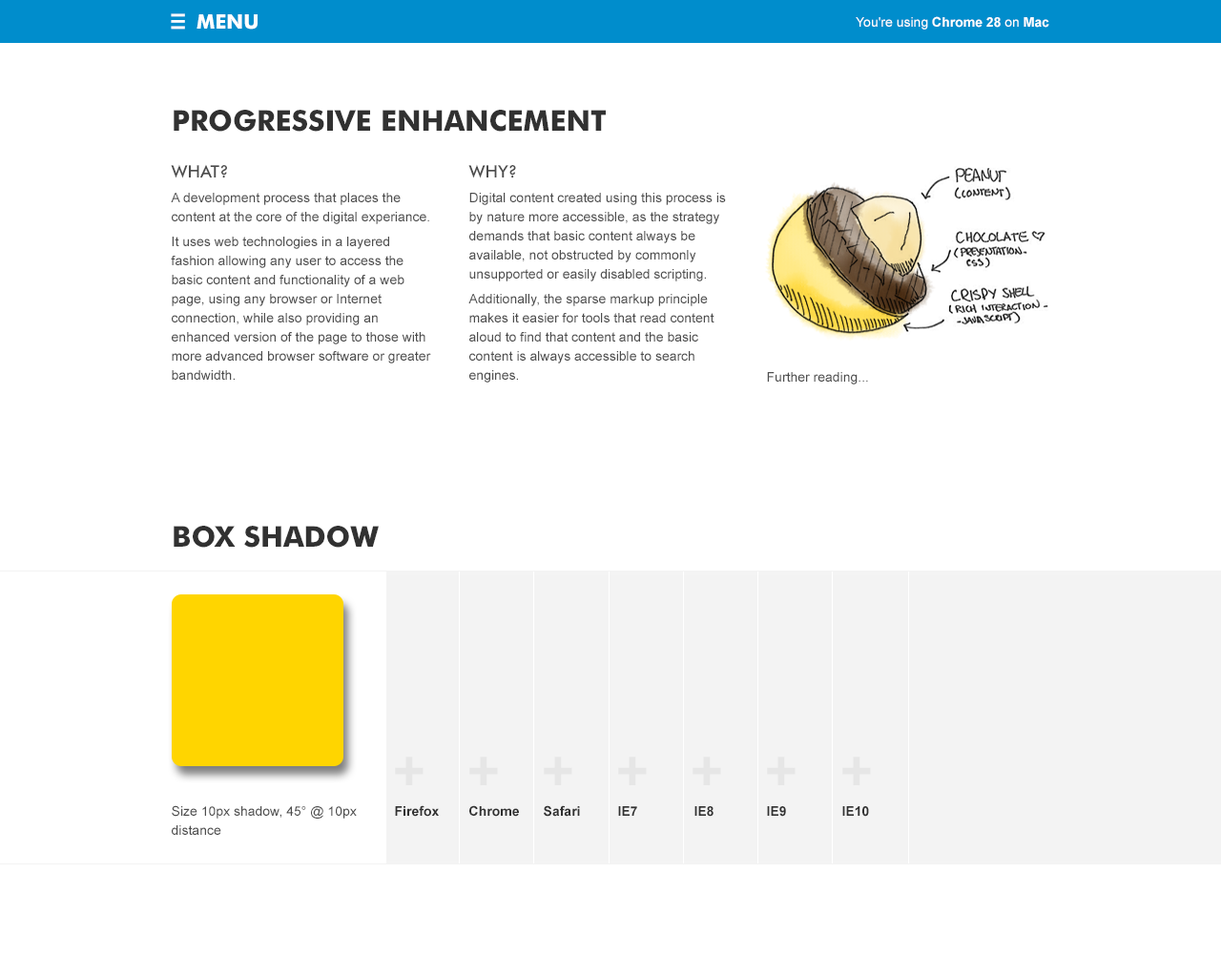
<style>
.page{position:relative;width:1221px;height:977px;background:#ffffff}
.page>*{position:absolute;margin:0}
.t1{font:28.6px "ArialMT";color:#ffffff;text-transform:uppercase}
.t2{font:20px "FuturaBT-Bold";color:#ffffff;text-transform:uppercase}
.t3{font:13.4px "ArialMT";color:#ffffff}
.t4{font:13.4px "Arial-BoldMT";color:#ffffff}
.t5{font:28.6px "FuturaBT-Bold";color:#313131;text-transform:uppercase}
.t6{font:13.4px/19.1px "ArialMT";color:#4d4d4d}
.t7{font:17.2px/19.1px "FuturaBT-Medium";color:#4d4d4d;text-transform:uppercase}
.t8{font:13.4px "ArialMT";color:#4d4d4d}
.t9{font:47.7px "FuturaBT-ExtraBlack";color:#e6e6e6;text-transform:uppercase}
.t10{font:13.4px "Arial-BoldMT";color:#313131}
</style>
<div class="page">
<p class="t1" style="left:171px;top:13px;width:14px;height:17px">≡</p>
<p class="t2" style="left:196px;top:14px;width:62px;height:16px">MENU</p>
<p class="t3" style="left:856px;top:16px;width:193px;height:14px">You're using<span class="t4"> Chrome 28 </span>on<span class="t4"> Mac</span></p>
<p class="t5" style="left:174px;top:110px;width:432px;height:22px">Progressive Enhancement</p>
<p class="t6" style="left:171px;top:164px;width:260px;height:216px"><span class="t7">What?<br></span>A development process that places the content at the core of the digital experiance. <br>It uses web technologies in a layered fashion allowing any user to access the basic content and functionality of a web page, using any browser or Internet connection, while also providing an enhanced version of the page to those with more advanced browser software or greater bandwidth.</p>
<p class="t6" style="left:468px;top:164px;width:258px;height:218px"><span class="t7">WHy?<br></span>Digital content created using this process is by nature more accessible, as the strategy demands that basic content always be available, not obstructed by commonly unsupported or easily disabled scripting. <br>Additionally, the sparse markup principle makes it easier for tools that read content aloud to find that content and the basic content is always accessible to search engines.</p>
<p class="t8" style="left:767px;top:372px;width:101px;height:12px">Further reading...</p>
<p class="t5" style="left:174px;top:526px;width:205px;height:21px">Box Shadow</p>
<p class="t9" style="left:395px;top:756px;width:28px;height:29px">+</p>
<p class="t9" style="left:469px;top:756px;width:29px;height:29px">+</p>
<p class="t9" style="left:544px;top:756px;width:28px;height:29px">+</p>
<p class="t9" style="left:618px;top:756px;width:29px;height:29px">+</p>
<p class="t9" style="left:692px;top:756px;width:29px;height:29px">+</p>
<p class="t9" style="left:767px;top:756px;width:28px;height:29px">+</p>
<p class="t9" style="left:842px;top:756px;width:29px;height:29px">+</p>
<p class="t6" style="left:172px;top:805px;width:185px;height:30px">Size 10px shadow, 45° @ 10px distance</p>
<p class="t10" style="left:395px;top:805px;width:44px;height:11px">Firefox</p>
<p class="t10" style="left:469px;top:805px;width:50px;height:11px">Chrome</p>
<p class="t10" style="left:544px;top:805px;width:36px;height:11px">Safari</p>
<p class="t10" style="left:618px;top:806px;width:19px;height:10px">IE7</p>
<p class="t10" style="left:694px;top:806px;width:19px;height:10px">IE8</p>
<p class="t10" style="left:767px;top:806px;width:19px;height:10px">IE9</p>
<p class="t10" style="left:842px;top:806px;width:27px;height:10px">IE10</p>
</div>
